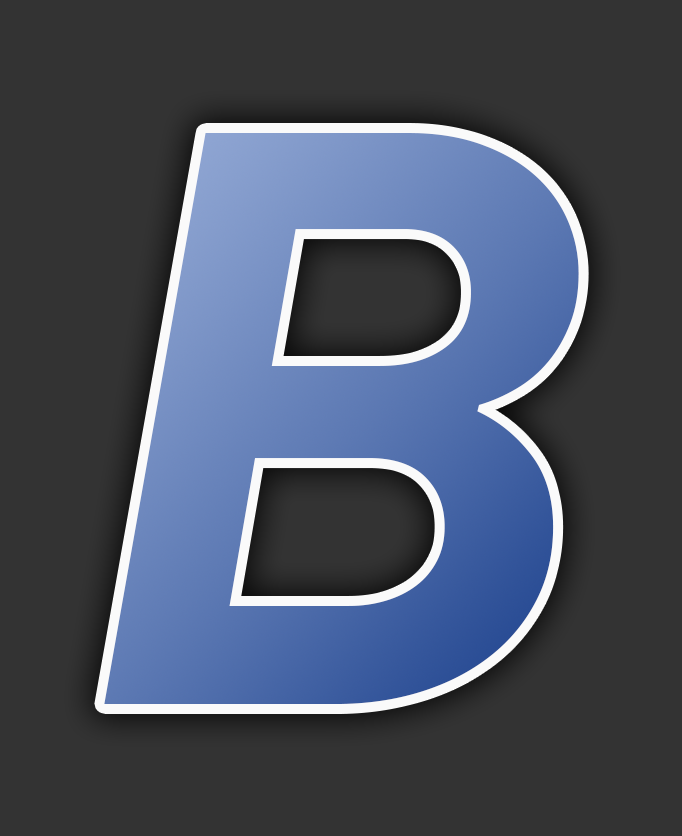
<style>
.page{position:relative;width:682px;height:836px;background:#333333}
.page>*{position:absolute;margin:0}
.t1{font:797px "ProductSans-BoldItalic";letter-spacing:-0.22em}
</style>
<div class="page">
<p class="t1" style="left:104px;top:133px;width:475px;height:571px">B</p>
</div>
